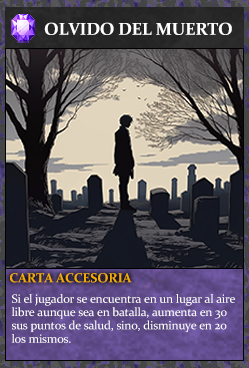
<style>
.page{position:relative;width:249px;height:368px}
.page>*{position:absolute;margin:0}
.t1{font:17.3px "Constantia-Bold";letter-spacing:-0.02em;color:#ffffff}
.t2{font:13.3px "Constantia-Bold";letter-spacing:-0.02em;color:#f2ac05}
.t3{font:12px/13.3px "Constantia";letter-spacing:-0.02em;color:#ffffff}
</style>
<div class="page">
<p class="t1" style="left:44px;top:22px;width:188px;height:13px">OLVIDO DEL MUERTO</p>
<p class="t2" style="left:10px;top:273px;width:122px;height:10px">CARTA ACCESORIA</p>
<p class="t3" style="left:11px;top:294px;width:224px;height:49px">Si el jugador se encuentra en un lugar al aire<br>libre aunque sea en batalla, aumenta en 30<br>sus puntos de salud, sino, disminuye en 20<br>los mismos.</p>
</div>
